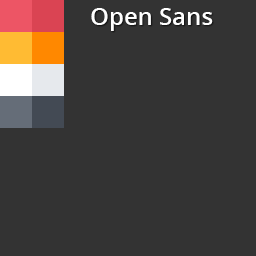
<style>
.page{position:relative;width:256px;height:256px;background:#333333}
.page>*{position:absolute;margin:0}
.t1{font:24px "OpenSans-Semibold";color:#ffffff}
</style>
<div class="page">
<p class="t1" style="left:91px;top:8px;width:122px;height:23px">Open Sans</p>
</div>
